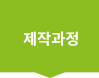
<style>
.page{position:relative;width:99px;height:78px;background:#8cbe21}
.page>*{position:absolute;margin:0}
.t1{font:15.4px "NotoSansCJKkr-Bold";color:#ffffff}
</style>
<div class="page">
<p class="t1" style="left:23px;top:31px;width:55px;height:15px">제작과정</p>
</div>
